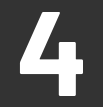
<style>
.page{position:relative;width:103px;height:107px;background:#333333}
.page>*{position:absolute;margin:0}
.t1{font:120px "Barlow-Bold";color:#ffffff}
</style>
<div class="page">
<p class="t1" style="left:19px;top:12px;width:64px;height:84px">4</p>
</div>
